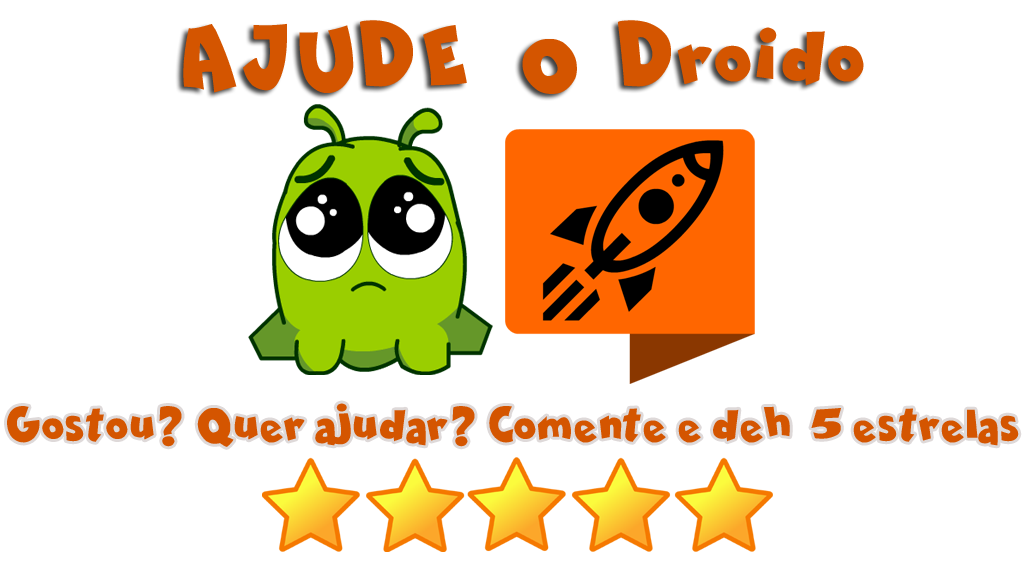
<style>
.page{position:relative;width:1024px;height:577px;background:#ffffff}
.page>*{position:absolute;margin:0}
.t1{font:81.4px "ComicaBD-Bold";color:#d45500}
.t2{font:48px "ComicaBD-Bold";color:#d45500}
</style>
<div class="page">
<p class="t1" style="left:183px;top:20px;width:681px;height:74px">AJUDE   O  Droido</p>
<p class="t2" style="left:7px;top:403px;width:1012px;height:44px">Gostou? Quer ajudar? Comente e deh  5 estrelas</p>
</div>
